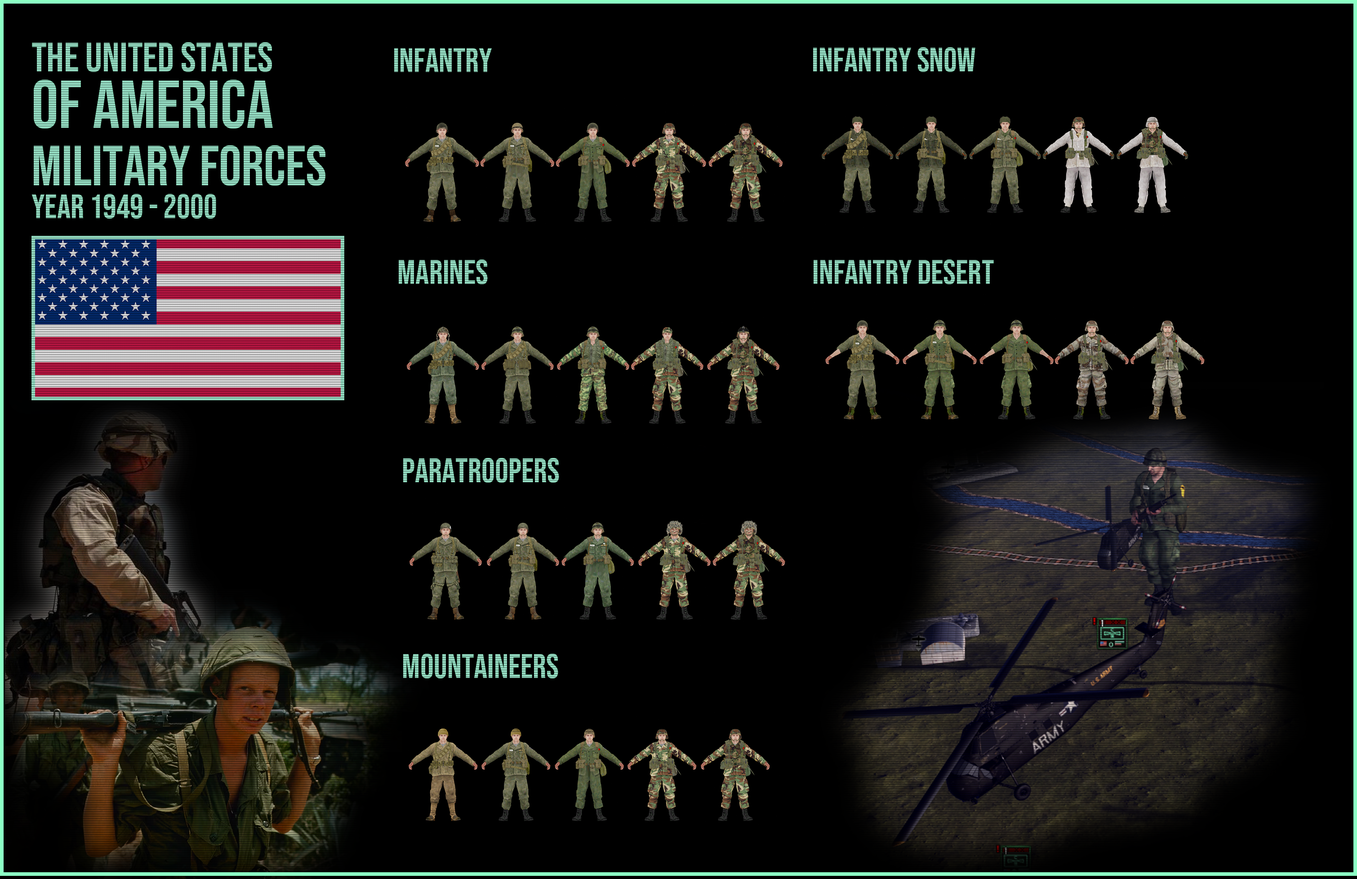
<style>
.page{position:relative;width:1357px;height:879px;background:#000000}
.page>*{position:absolute;margin:0}
.t1{font:41.2px/33.7px "BebasNeue-Regular"}
.t2{font:67.4px/67.4px "BebasNeue-Regular"}
.t3{font:56.2px/67.4px "BebasNeue-Regular"}
.t4{font:33.7px "BebasNeue-Regular"}
</style>
<div class="page">
<p class="t1" style="left:32px;top:42px;width:294px;height:144px">the United States <br><span class="t2">of america<br></span><span class="t3">military forces</span></p>
<p class="t4" style="left:394px;top:48px;width:98px;height:24px">Infantry</p>
<p class="t4" style="left:813px;top:47px;width:163px;height:25px">infantry snow</p>
<p class="t4" style="left:31px;top:194px;width:185px;height:25px">year 1949 - 2000</p>
<p class="t4" style="left:399px;top:259px;width:89px;height:25px">Marines</p>
<p class="t4" style="left:814px;top:259px;width:180px;height:25px">infantry desert</p>
<p class="t4" style="left:403px;top:458px;width:156px;height:24px">paratroopers</p>
<p class="t4" style="left:403px;top:653px;width:155px;height:25px">mountaineers</p>
</div>
